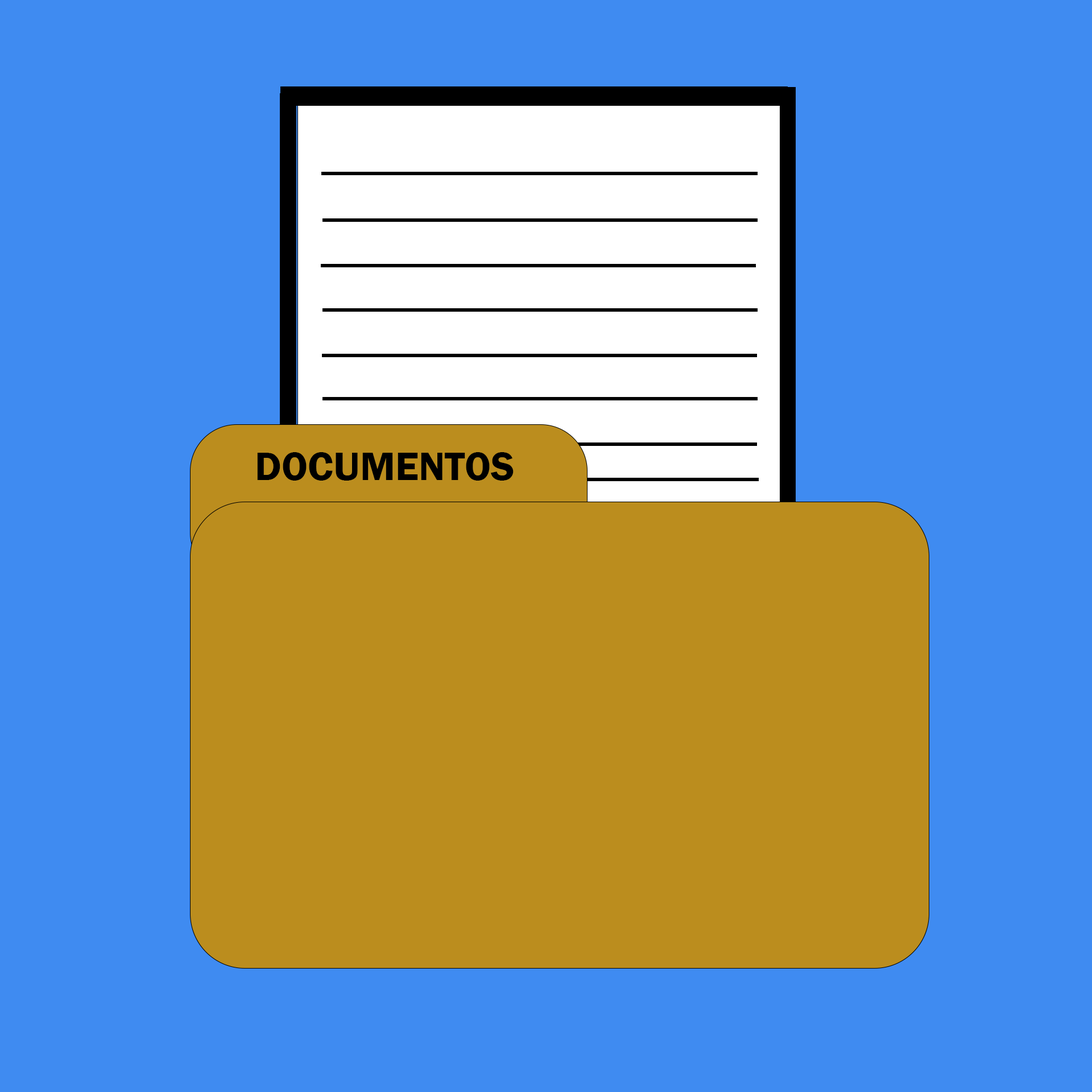
<style>
.page{position:relative;width:1092px;height:1092px;background:#3f8bf1}
.page>*{position:absolute;margin:0}
.t1{font:40.9px "FranklinGothic-Demi";color:#000000}
</style>
<div class="page">
<p class="t1" style="left:257px;top:452px;width:257px;height:29px">DOCUMENTOS</p>
</div>
